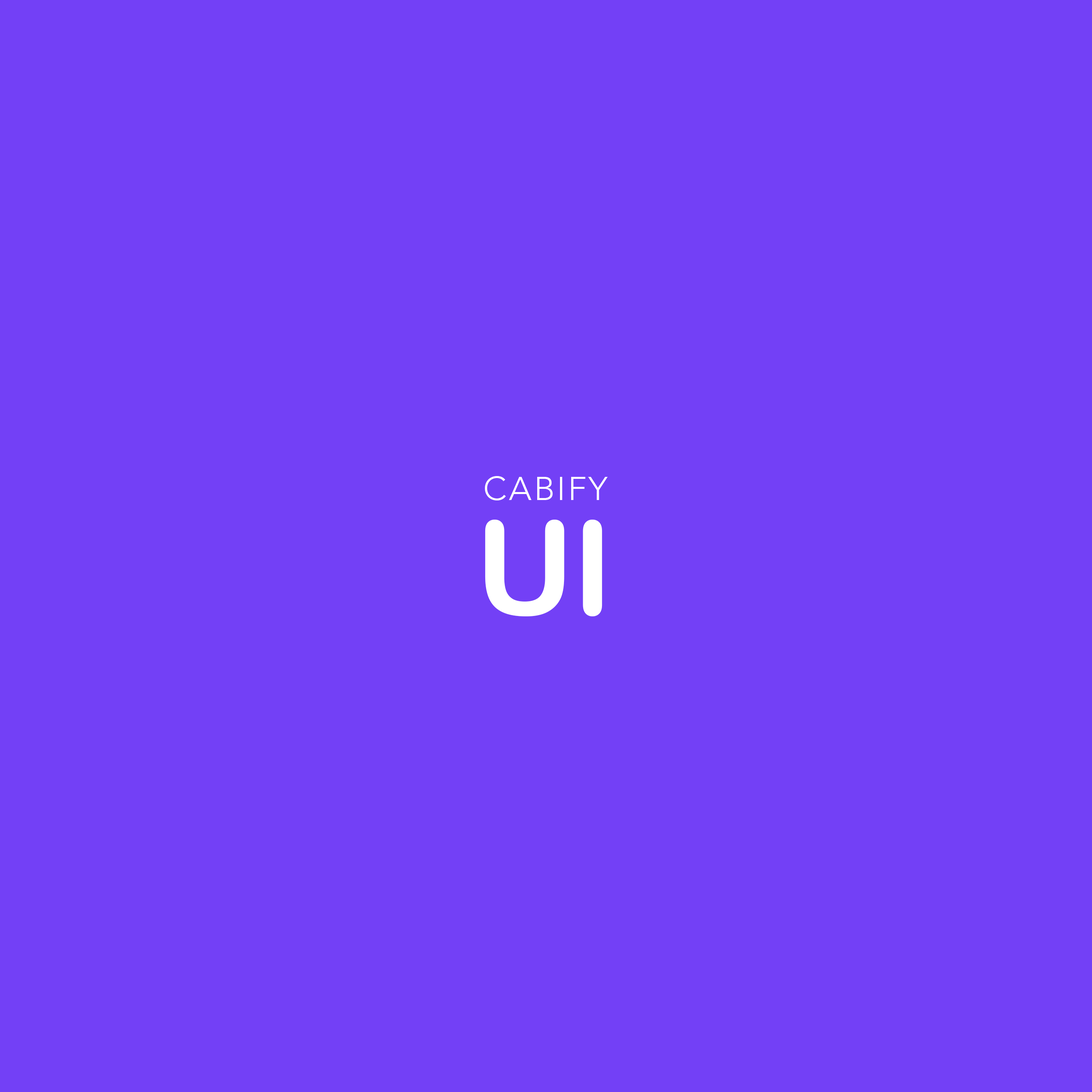
<style>
.page{position:relative;width:1092px;height:1092px;background:#7340f6}
.page>*{position:absolute;margin:0}
.t1{font:33px "Avenir-Light";letter-spacing:0.07em;color:#ffffff}
.t2{font:130.9px "ArialRoundedMTBold";letter-spacing:-0.02em;color:#ffffff}
</style>
<div class="page">
<p class="t1" style="left:485px;top:476px;width:123px;height:24px">CABIFY</p>
<p class="t2" style="left:485px;top:520px;width:117px;height:96px">UI</p>
</div>
